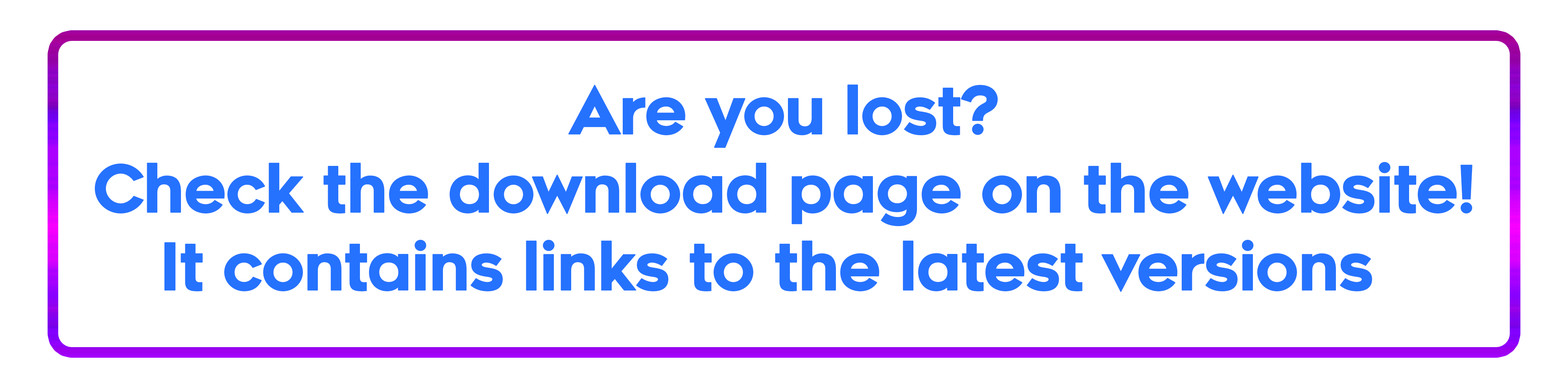
<style>
.page{position:relative;width:1568px;height:388px;background:#ffffff}
.page>*{position:absolute;margin:0}
.t1{font:65px "Renogare-Regular";letter-spacing:-0.05em;color:#2572ff;font-weight:bold}
</style>
<div class="page">
<p class="t1" style="left:95px;top:85px;width:1377px;height:207px;text-align:center">Are you lost?<br>Check the download page on the website!<br>It contains links to the latest versions</p>
</div>
